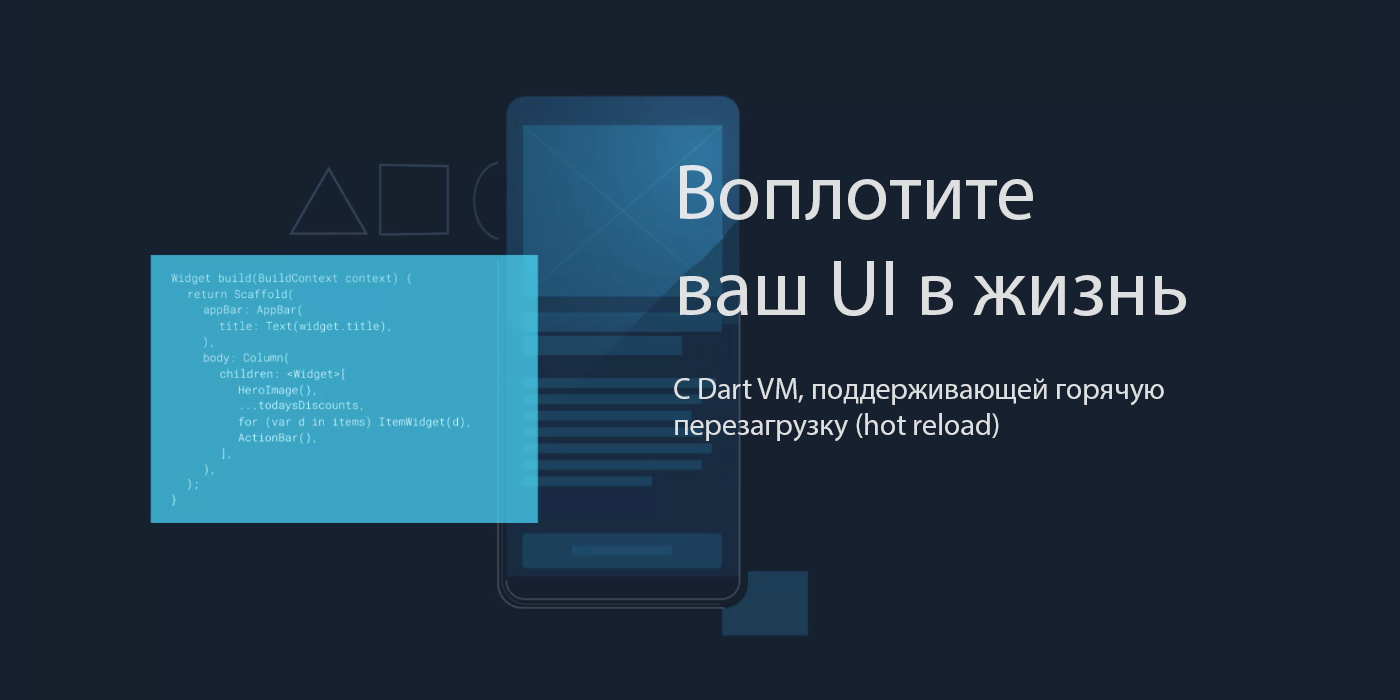
<style>
.page{position:relative;width:1400px;height:700px;background:#16202f}
.page>*{position:absolute;margin:0}
.t1{font:80px "MyriadPro-Regular";color:#dedfe0}
.t2{font:30px "MyriadPro-Regular";color:#dedfe0}
</style>
<div class="page">
<p class="t1" style="left:680px;top:165px;width:506px;height:151px">Воплотите <br>ваш UI в жизнь</p>
<p class="t2" style="left:674px;top:378px;width:490px;height:64px">C Dart VM, поддерживающей горячую перезагрузку (hot reload)</p>
</div>
